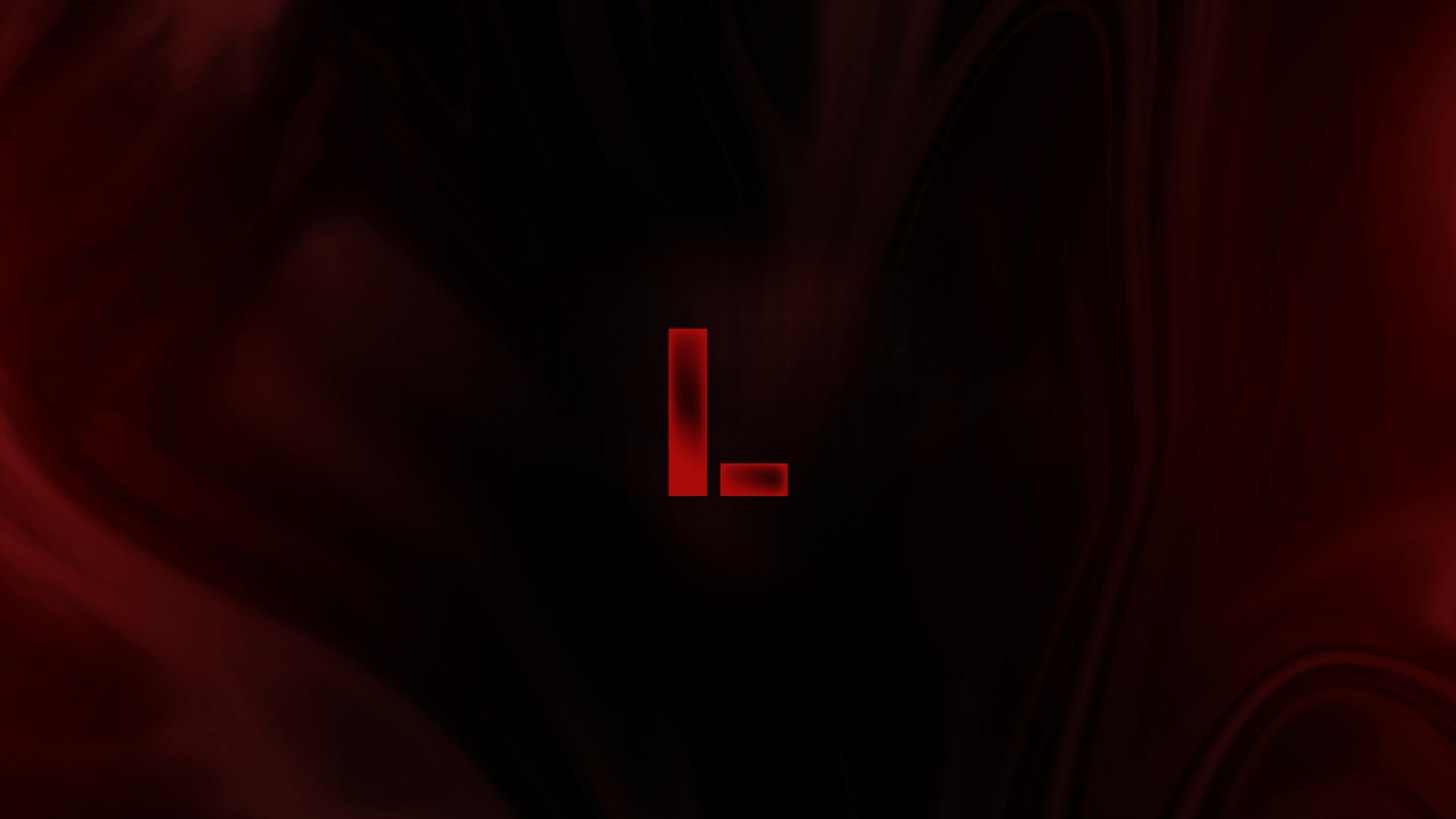
<style>
.page{position:relative;width:1456px;height:819px}
.page>*{position:absolute;margin:0}
.t1{font:238.9px "Town40Stencil-Bold"}
</style>
<div class="page">
<p class="t1" style="left:668px;top:328px;width:120px;height:168px">l</p>
</div>
